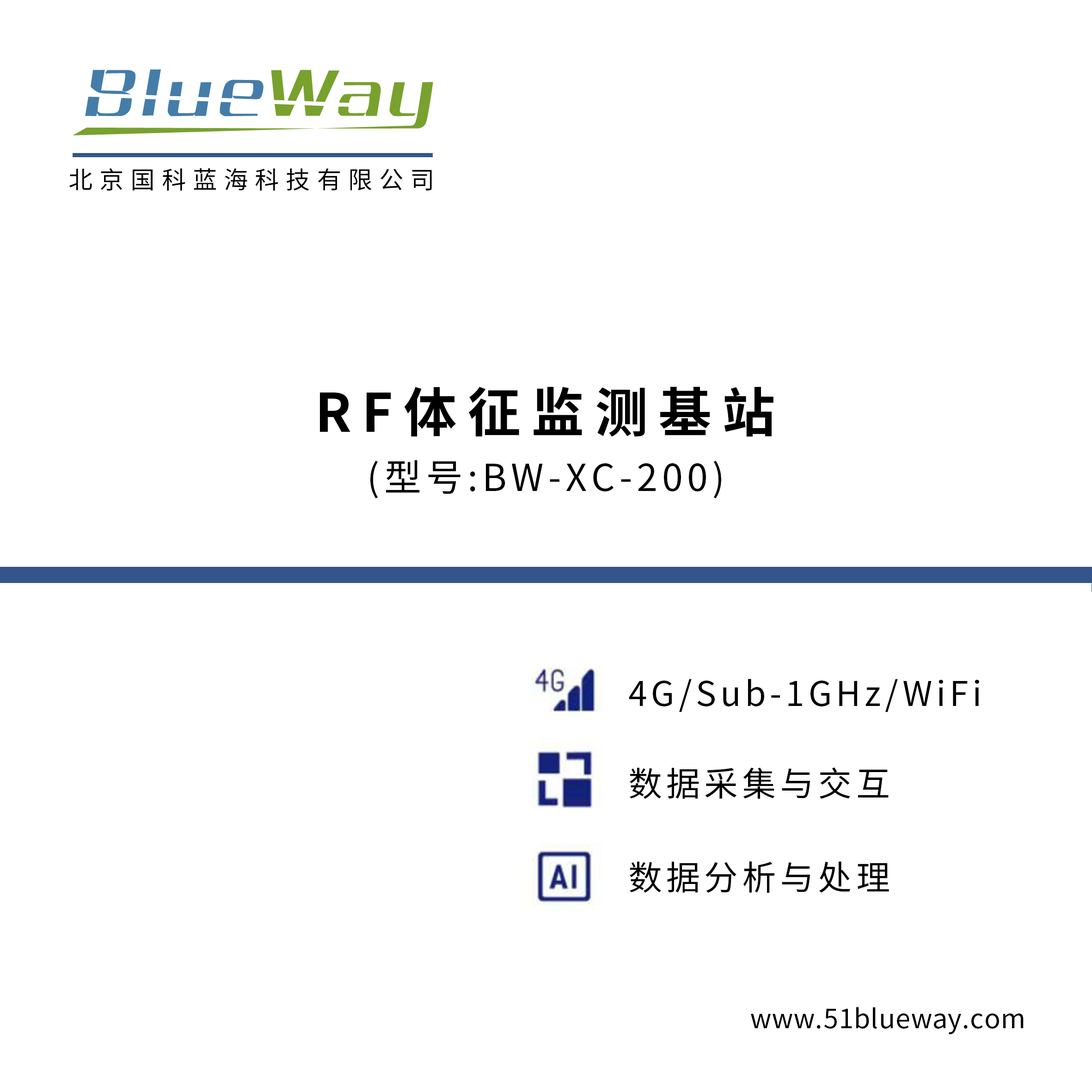
<style>
.page{position:relative;width:1092px;height:1092px;background:#ffffff}
.page>*{position:absolute;margin:0}
.t1{font:24.3px "SourceHanSansCN-Regular";letter-spacing:0.28em;color:#000000}
.t2{font:53.1px "SourceHanSansCN-Bold";letter-spacing:0.2em;color:#000000}
.t3{font:37.2px "SourceHanSansCN-Regular";letter-spacing:0.12em;color:#000000}
.t4{font:33.9px "SourceHanSansCN-Regular";letter-spacing:0.12em;color:#000000}
.t5{font:26.5px "SourceHanSansCN-Regular";letter-spacing:0.02em;color:#000000}
</style>
<div class="page">
<p class="t1" style="left:69px;top:168px;width:363px;height:23px">北京国科蓝海科技有限公司</p>
<p class="t2" style="left:320px;top:386px;width:453px;height:51px">RF体征监测基站</p>
<p class="t3" style="left:370px;top:460px;width:351px;height:38px">(型号:BW-XC-200)</p>
<p class="t4" style="left:629px;top:679px;width:350px;height:33px">4G/Sub-1GHz/WiFi</p>
<p class="t4" style="left:630px;top:767px;width:259px;height:32px">数据采集与交互</p>
<p class="t4" style="left:630px;top:861px;width:259px;height:32px">数据分析与处理</p>
<p class="t5" style="left:751px;top:1007px;width:273px;height:27px">www.51blueway.com</p>
</div>
